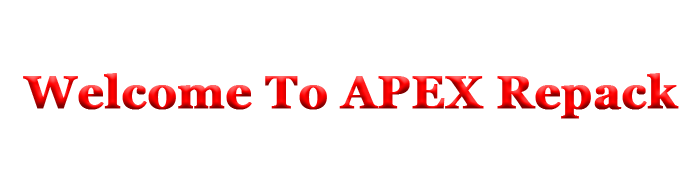
<style>
.page{position:relative;width:700px;height:169px;background:#ffffff}
.page>*{position:absolute;margin:0}
.t1{font:45.8px "Georgia-Bold";font-weight:bold}
</style>
<div class="page">
<p class="t1" style="left:23px;top:73px;width:656px;height:46px">Welcome To APEX Repack</p>
</div>
